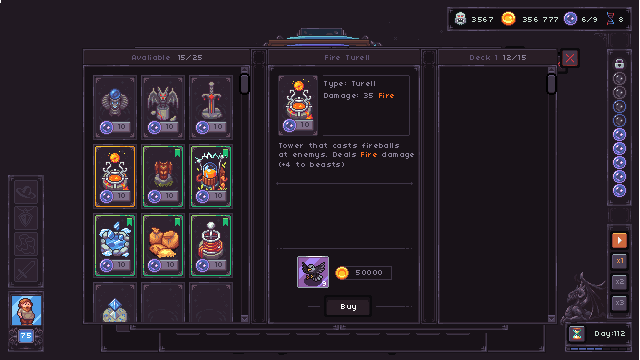
<style>
.page{position:relative;width:640px;height:360px;background:#181218}
.page>*{position:absolute;margin:0}
.t1{font:8px "04b03";letter-spacing:0.05em;color:#c7dcd0}
.t2{font:8px "04b03";letter-spacing:0.05em;color:#615575}
.t3{font:8px "04b03";letter-spacing:0.05em;color:#8c839a}
.t4{font:8px "04b03";letter-spacing:0.05em;color:#fb6b1d}
.t5{font:8px "04b03";letter-spacing:0.05em;color:#3e3546}
.t6{font:8px "04b03";letter-spacing:0.05em;color:#e6904e}
.t7{font:8px "04b03";letter-spacing:0.05em;color:#ffffff}
</style>
<div class="page">
<p class="t1" style="left:472px;top:17px;width:21px;height:5px">3567</p>
<p class="t1" style="left:523px;top:17px;width:35px;height:5px">356 777</p>
<p class="t1" style="left:582px;top:17px;width:15px;height:5px">6/9</p>
<p class="t1" style="left:619px;top:17px;width:4px;height:5px">8</p>
<p class="t2" style="left:132px;top:55px;width:70px;height:5px">Avaliable  <span class="t3">15/25</span></p>
<p class="t2" style="left:325px;top:55px;width:44px;height:5px">Fire Turell</p>
<p class="t2" style="left:470px;top:55px;width:56px;height:5px">Deck 1 <span class="t3">12/15</span></p>
<p class="t3" style="left:324px;top:81px;width:51px;height:7px">Type: Turell</p>
<p class="t3" style="left:324px;top:93px;width:70px;height:7px">Damage: 35 <span class="t4">Fire</span></p>
<p class="t5" style="left:118px;top:124px;width:7px;height:5px">10</p>
<p class="t5" style="left:166px;top:124px;width:7px;height:5px">10</p>
<p class="t5" style="left:214px;top:124px;width:8px;height:5px">10</p>
<p class="t5" style="left:301px;top:122px;width:8px;height:5px">10</p>
<p class="t3" style="left:279px;top:143px;width:135px;height:24px">Tower that casts fireballs<br>at enemys. Deals <span class="t4">Fire</span> damage<br>(+4 to beasts)</p>
<p class="t5" style="left:118px;top:193px;width:7px;height:5px">10</p>
<p class="t5" style="left:166px;top:193px;width:7px;height:5px">10</p>
<p class="t5" style="left:215px;top:193px;width:7px;height:5px">10</p>
<p class="t5" style="left:118px;top:262px;width:7px;height:5px">10</p>
<p class="t5" style="left:167px;top:262px;width:7px;height:5px">10</p>
<p class="t5" style="left:215px;top:262px;width:7px;height:5px">10</p>
<p class="t3" style="left:356px;top:270px;width:26px;height:5px">50000</p>
<p class="t6" style="left:617px;top:258px;width:6px;height:5px">x1</p>
<p class="t7" style="left:322px;top:281px;width:4px;height:5px">9</p>
<p class="t3" style="left:616px;top:279px;width:8px;height:5px">x2</p>
<p class="t7" style="left:341px;top:304px;width:15px;height:7px">Buy</p>
<p class="t3" style="left:616px;top:300px;width:8px;height:5px">x3</p>
<p class="t7" style="left:21px;top:333px;width:10px;height:5px">75</p>
<p class="t1" style="left:595px;top:331px;width:30px;height:7px">Day:112</p>
</div>
